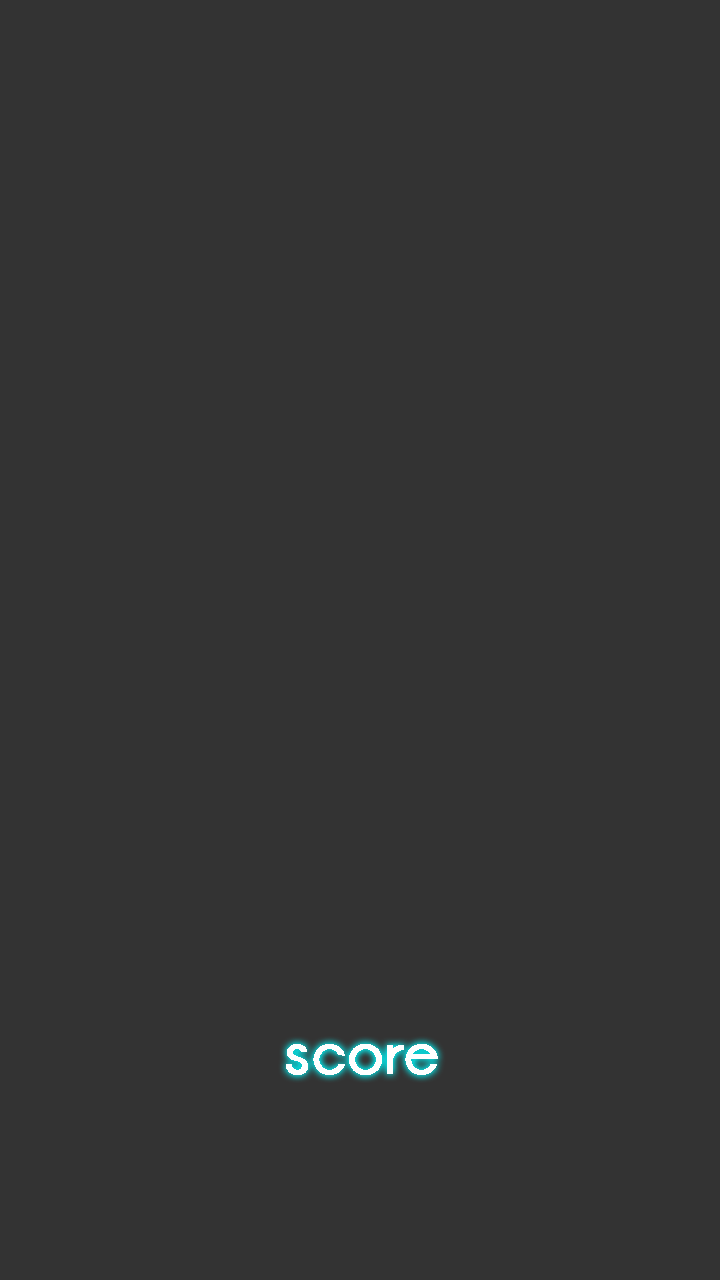
<style>
.page{position:relative;width:720px;height:1280px;background:#333333}
.page>*{position:absolute;margin:0}
.t1{font:55.1px "Opificio";letter-spacing:0.05em;color:#feffff;font-weight:bold}
</style>
<div class="page">
<p class="t1" style="left:286px;top:1044px;width:152px;height:31px">score</p>
</div>
